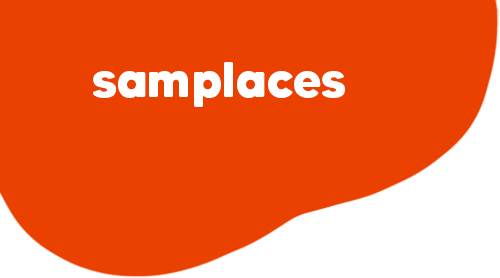
<style>
.page{position:relative;width:500px;height:278px;background:#eb4100}
.page>*{position:absolute;margin:0}
.t1{font:49.9px "MADETommySoft-ExtraBold";color:#ffffff}
</style>
<div class="page">
<p class="t1" style="left:93px;top:62px;width:252px;height:45px">samplaces</p>
</div>
